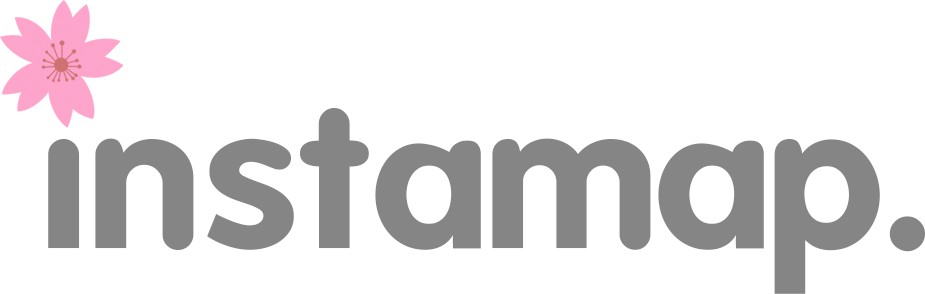
<style>
.page{position:relative;width:925px;height:294px;background:#ffffff}
.page>*{position:absolute;margin:0}
.t1{font:200px "Folks-Bold";color:#858585}
</style>
<div class="page">
<p class="t1" style="left:48px;top:102px;width:877px;height:192px">instamap.</p>
</div>
